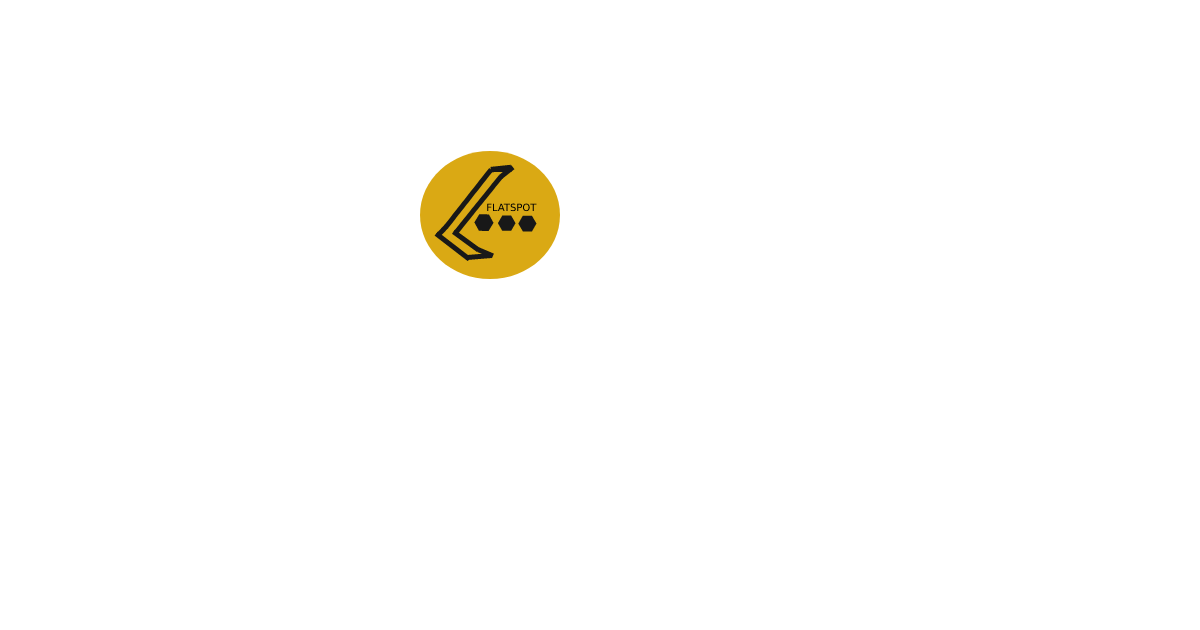
<style>
.page{position:relative;width:1200px;height:630px;background:#ffffff}
.page>*{position:absolute;margin:0}
.t1{font:10px "DejaVuSans";color:#000000}
</style>
<div class="page">
<p class="t1" style="left:487px;top:203px;width:50px;height:9px">FLATSPOT</p>
</div>
